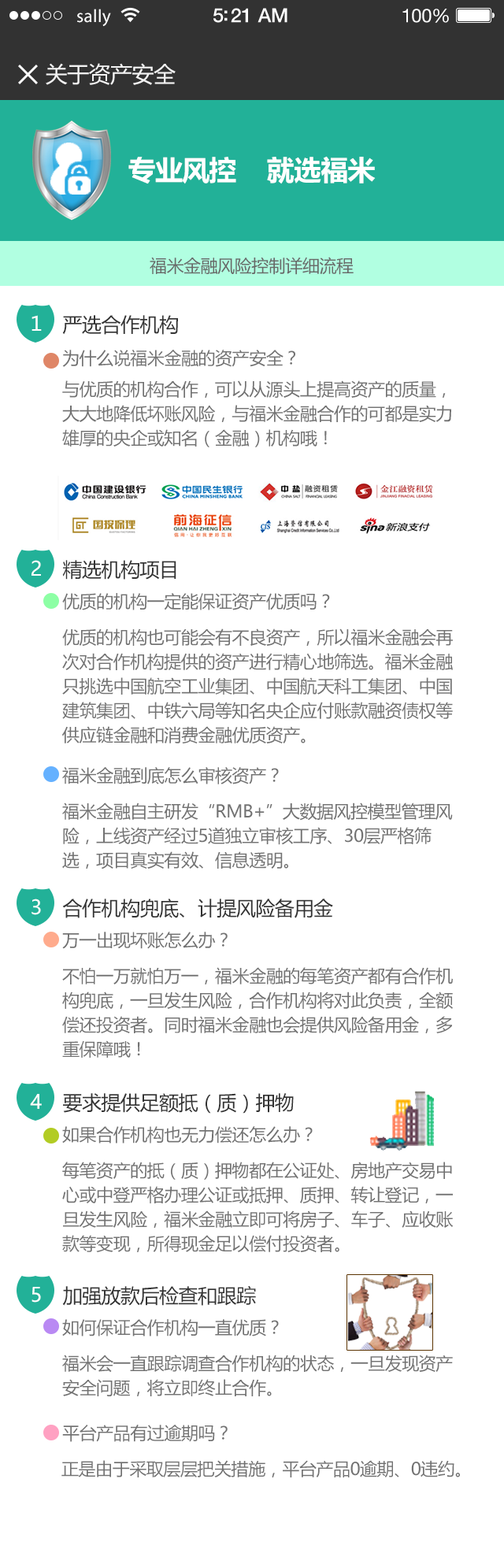
<style>
.page{position:relative;width:504px;height:1568px;background:#ffffff}
.page>*{position:absolute;margin:0}
.t1{font:18.1px "MyriadPro-Regular";letter-spacing:0.02em;color:#ffffff}
.t2{font:19.7px "HelveticaNeue-Medium";letter-spacing:-0.02em;color:#ffffff}
.t3{font:18.9px "HelveticaNeue";letter-spacing:-0.02em;color:#ffffff}
.t4{font:22.1px "MicrosoftYaHei";letter-spacing:-0.02em;color:#f3f3f3}
.t5{font:27.6px "MicrosoftYaHei-Bold";letter-spacing:-0.02em;color:#ffffff}
.t6{font:17.3px "MicrosoftYaHei";letter-spacing:-0.02em;color:#696969}
.t7{font:19.7px "MicrosoftYaHei";letter-spacing:-0.02em;color:#ffffff}
.t8{font:19.7px "MicrosoftYaHei";letter-spacing:-0.02em;color:#333333}
.t9{font:17.3px "MicrosoftYaHei";letter-spacing:-0.02em;color:#727272}
.t10{font:17.3px/24.4px "MicrosoftYaHei";letter-spacing:-0.02em;color:#727272}
</style>
<div class="page">
<p class="t1" style="left:77px;top:9px;width:34px;height:18px">sally</p>
<p class="t2" style="left:213px;top:8px;width:74px;height:15px">5:21 AM</p>
<p class="t3" style="left:402px;top:9px;width:47px;height:14px">100%</p>
<p class="t4" style="left:46px;top:63px;width:130px;height:22px">关于资产安全</p>
<p class="t5" style="left:128px;top:156px;width:248px;height:28px">专业风控    就选福米</p>
<p class="t6" style="left:150px;top:257px;width:204px;height:18px">福米金融风险控制详细流程</p>
<p class="t7" style="left:32px;top:315px;width:10px;height:16px">１</p>
<p class="t8" style="left:62px;top:315px;width:116px;height:20px">严选合作机构</p>
<p class="t9" style="left:62px;top:350px;width:233px;height:17px">为什么说福米金融的资产安全？</p>
<p class="t10" style="left:62px;top:380px;width:389px;height:67px">与优质的机构合作，可以从源头上提高资产的质量，大大地降低坏账风险，与福米金融合作的可都是实力雄厚的央企或知名（金融）机构哦！</p>
<p class="t7" style="left:32px;top:560px;width:9px;height:16px">2</p>
<p class="t8" style="left:62px;top:560px;width:114px;height:20px">精选机构项目</p>
<p class="t9" style="left:62px;top:593px;width:268px;height:17px">优质的机构一定能保证资产优质吗？</p>
<p class="t10" style="left:62px;top:628px;width:391px;height:115px">优质的机构也可能会有不良资产，所以福米金融会再次对合作机构提供的资产进行精心地筛选。福米金融只挑选中国航空工业集团、中国航天科工集团、中国建筑集团、中铁六局等知名央企应付账款融资债权等供应链金融和消费金融优质资产。</p>
<p class="t9" style="left:62px;top:767px;width:217px;height:17px">福米金融到底怎么审核资产？</p>
<p class="t10" style="left:62px;top:803px;width:391px;height:66px">福米金融自主研发“RMB+”大数据风控模型管理风险，上线资产经过5道独立审核工序、30层严格筛选，项目真实有效、信息透明。</p>
<p class="t7" style="left:32px;top:899px;width:9px;height:16px">3</p>
<p class="t8" style="left:62px;top:899px;width:271px;height:19px">合作机构兜底、计提风险备用金</p>
<p class="t9" style="left:62px;top:932px;width:166px;height:17px">万一出现坏账怎么办？</p>
<p class="t10" style="left:62px;top:967px;width:391px;height:91px">不怕一万就怕万一，福米金融的每笔资产都有合作机构兜底，一旦发生风险，合作机构将对此负责，全额偿还投资者。同时福米金融也会提供风险备用金，多重保障哦！</p>
<p class="t7" style="left:30px;top:1094px;width:12px;height:15px">4</p>
<p class="t8" style="left:63px;top:1093px;width:231px;height:21px">要求提供足额抵（质）押物</p>
<p class="t9" style="left:62px;top:1126px;width:251px;height:18px">如果合作机构也无力偿还怎么办？</p>
<p class="t10" style="left:62px;top:1162px;width:392px;height:90px">每笔资产的抵（质）押物都在公证处、房地产交易中心或中登严格办理公证或抵押、质押、转让登记，一旦发生风险，福米金融立即可将房子、车子、应收账款等变现，所得现金足以偿付投资者。</p>
<p class="t7" style="left:32px;top:1287px;width:9px;height:16px">5</p>
<p class="t8" style="left:62px;top:1285px;width:194px;height:21px">加强放款后检查和跟踪</p>
<p class="t9" style="left:62px;top:1319px;width:217px;height:17px">如何保证合作机构一直优质？</p>
<p class="t10" style="left:62px;top:1355px;width:391px;height:41px">福米会一直跟踪调查合作机构的状态，一旦发现资产安全问题，将立即终止合作。</p>
<p class="t9" style="left:62px;top:1425px;width:166px;height:17px">平台产品有过逾期吗？</p>
<p class="t9" style="left:61px;top:1460px;width:399px;height:17px">正是由于采取层层把关措施，平台产品0逾期、0违约。</p>
</div>
